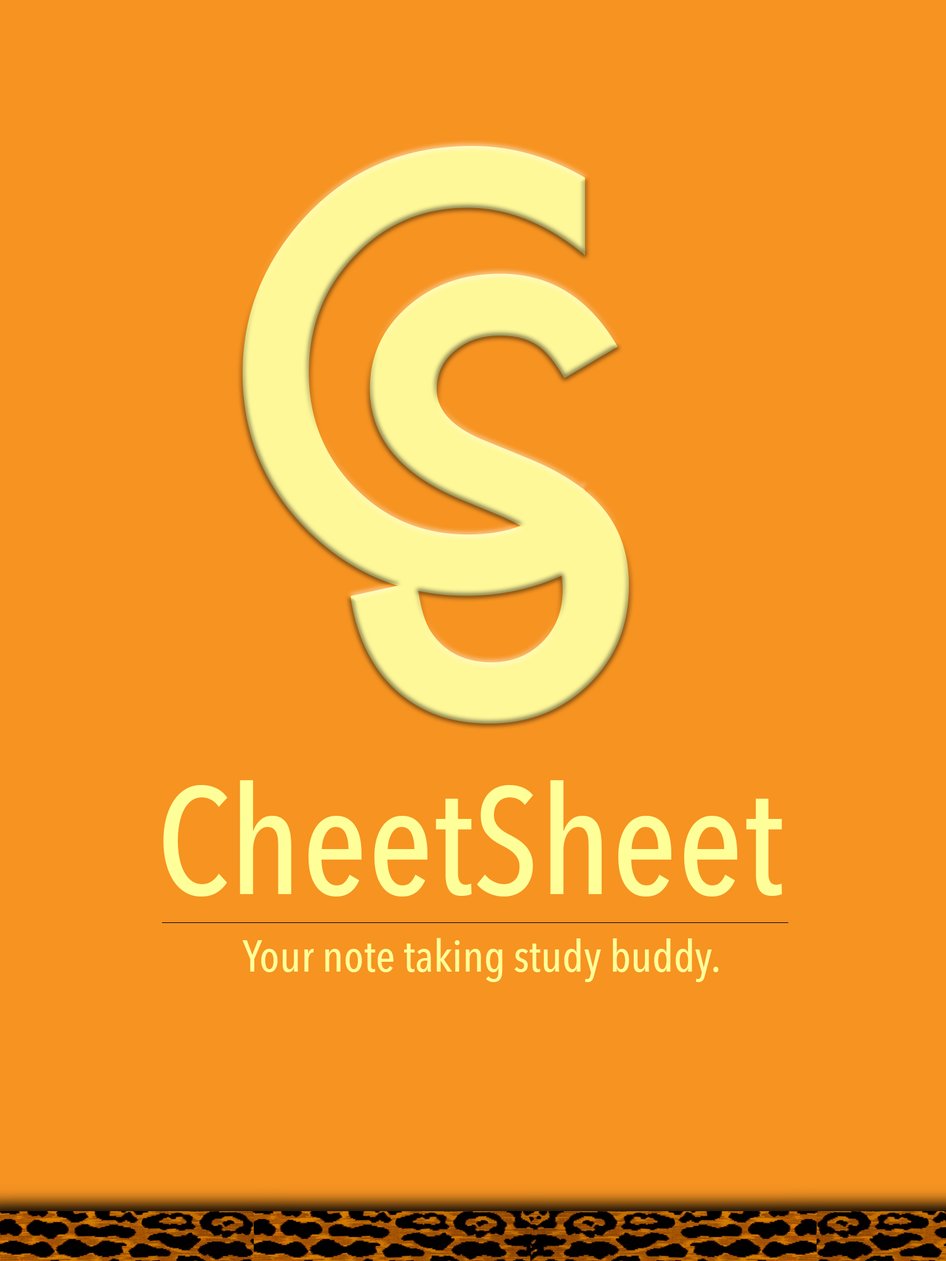
<style>
.page{position:relative;width:946px;height:1261px;background:#f69321}
.page>*{position:absolute;margin:0}
.t1{font:150.2px "AvenirNextCondensed-Medium";color:#ffff99}
.t2{font:44.3px "AvenirNextCondensed-Medium";color:#ffff99}
</style>
<div class="page">
<p class="t1" style="left:163px;top:780px;width:619px;height:116px">CheetSheet</p>
<p class="t2" style="left:242px;top:938px;width:477px;height:44px">Your note taking study buddy.</p>
</div>
